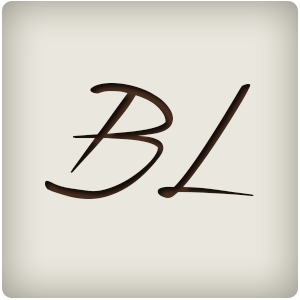
<style>
.page{position:relative;width:300px;height:300px;background:#eae7de}
.page>*{position:absolute;margin:0}
.t1{font:250px "The-Constellation-of-Heracles"}
</style>
<div class="page">
<p class="t1" style="left:45px;top:83px;width:209px;height:116px">BL</p>
</div>
